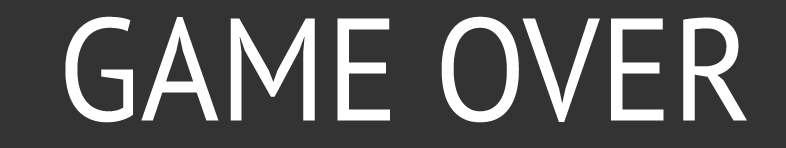
<style>
.page{position:relative;width:786px;height:148px;background:#333333}
.page>*{position:absolute;margin:0}
.t1{font:145.2px "PTSans-Regular";color:#ffffff;scale:0.93 1}
</style>
<div class="page">
<p class="t1" style="left:65px;top:16px;width:682px;height:107px">GAME OVER</p>
</div>
